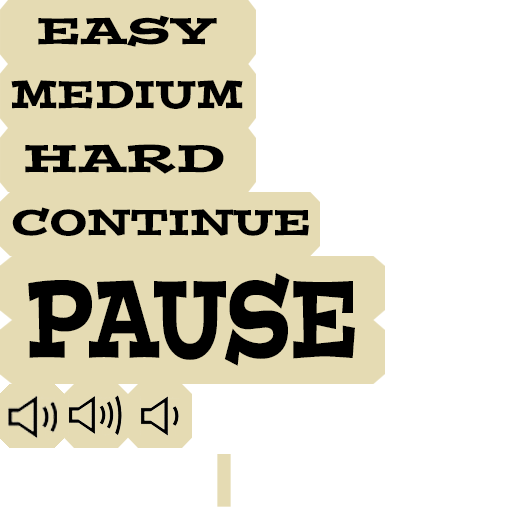
<style>
.page{position:relative;width:512px;height:512px;background:#ffffff}
.page>*{position:absolute;margin:0}
.t1{font:37.5px "PostinoStd";color:#000000;scale:1.21 1}
.t2{font:38.8px "PostinoStd";color:#000000}
.t3{font:38.7px "PostinoStd";color:#000000;scale:1.21 1}
.t4{font:36px "PostinoStd";color:#000000;scale:1.06 1}
.t5{font:109.4px "PostinoStd";color:#000000;scale:0.63 1}
</style>
<div class="page">
<p class="t1" style="left:38px;top:15px;width:179px;height:32px">EASY</p>
<p class="t2" style="left:11px;top:80px;width:232px;height:29px">MEDIUM</p>
<p class="t3" style="left:25px;top:144px;width:199px;height:30px">HARD</p>
<p class="t4" style="left:12px;top:207px;width:297px;height:29px">CONTINUE</p>
<p class="t5" style="left:28px;top:273px;width:327px;height:93px">PAUSE</p>
</div>
